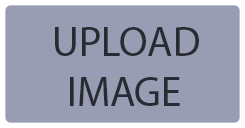
<style>
.page{position:relative;width:245px;height:128px;background:#999db3}
.page>*{position:absolute;margin:0}
.t1{font:41.7px "MyriadPro-Regular";color:#292b33}
</style>
<div class="page">
<p class="t1" style="left:55px;top:27px;width:144px;height:79px">UPLOAD<br>  IMAGE</p>
</div>
